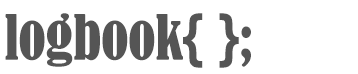
<style>
.page{position:relative;width:358px;height:74px;background:#ffffff}
.page>*{position:absolute;margin:0}
.t1{font:58px "BernardMT-Condensed";color:#555555}
</style>
<div class="page">
<p class="t1" style="left:5px;top:13px;width:246px;height:55px">logbook{ };</p>
</div>
